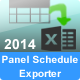
<style>
.page{position:relative;width:80px;height:80px;background:#3399ff}
.page>*{position:absolute;margin:0}
.t1{font:14px "Arial-BoldMT";color:#ffffff}
.t2{font:10px/14px "Arial-BoldMT";color:#ffffff}
</style>
<div class="page">
<p class="t1" style="left:4px;top:39px;width:32px;height:11px">2014</p>
<p class="t2" style="left:2px;top:55px;width:76px;height:24px;text-align:center">Panel Schedule<br>Exporter</p>
</div>
